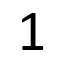
<style>
.page{position:relative;width:64px;height:64px;background:#ffffff}
.page>*{position:absolute;margin:0}
.t1{font:58.3px "Calibri";color:#000000}
</style>
<div class="page">
<p class="t1" style="left:22px;top:13px;width:22px;height:37px">1</p>
</div>
